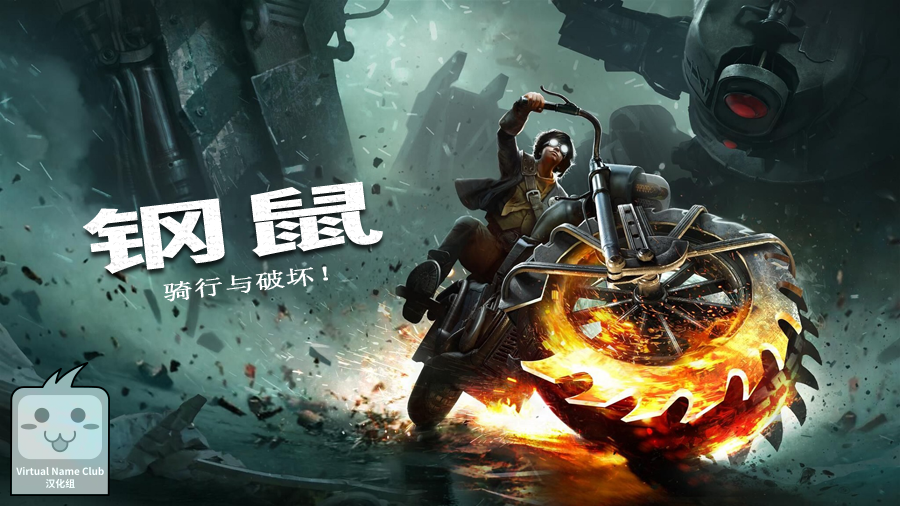
<style>
.page{position:relative;width:900px;height:506px}
.page>*{position:absolute;margin:0}
.t1{font:70px "SourceHanSansSC-Bold";color:#ffffff;font-weight:bold;scale:2.14 1}
.t2{font:21px "SimSun";color:#ffffff;font-weight:bold;scale:1.43 1}
</style>
<div class="page">
<p class="t1" style="left:83px;top:181px;width:300px;height:93px;rotate:-6deg">钢鼠</p>
<p class="t2" style="left:163px;top:266px;width:165px;height:36px;rotate:-6deg">骑行与破坏！</p>
</div>
